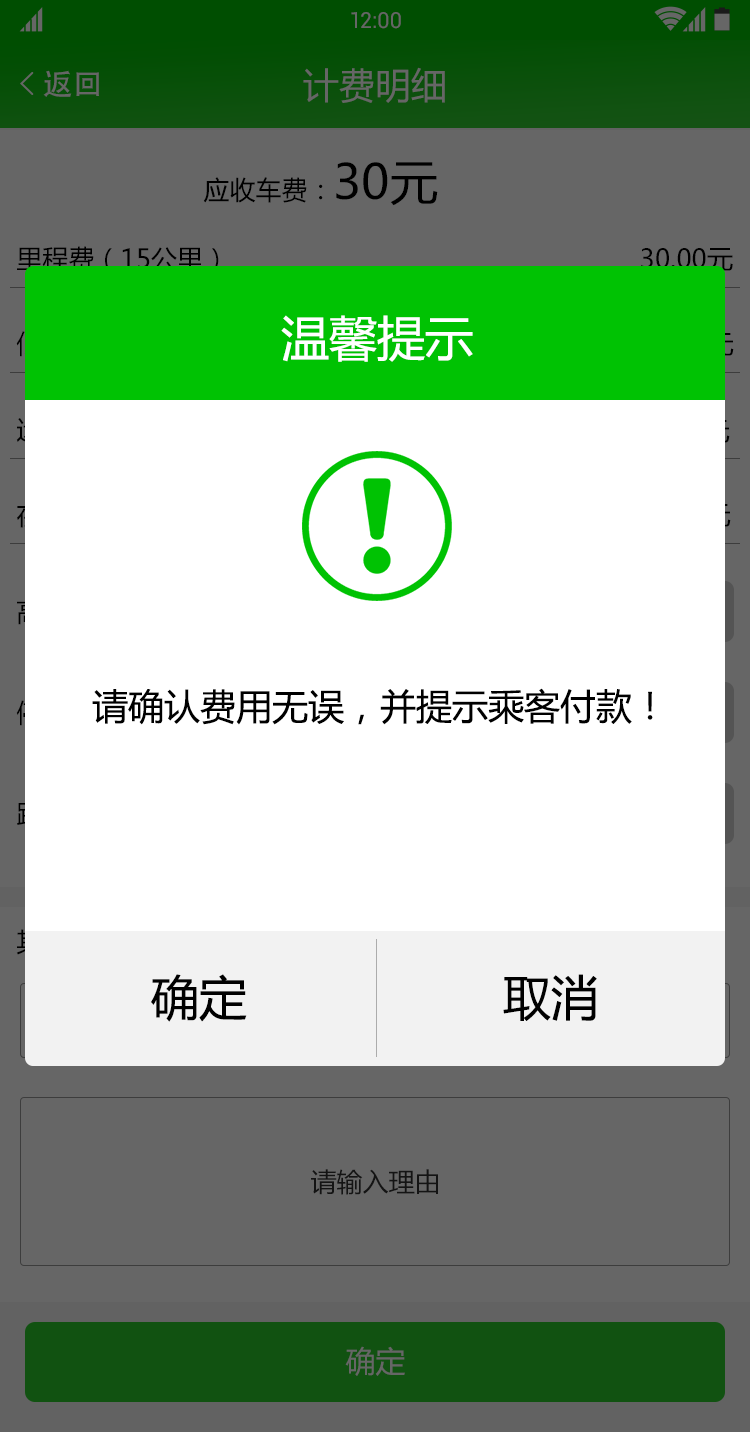
<style>
.page{position:relative;width:750px;height:1432px;background:#ffffff}
.page>*{position:absolute;margin:0}
.t1{font:22px "Roboto-Regular";color:#666666}
.t2{font:30px "AdobeHeitiStd-Regular";color:#666666}
.t3{font:36px "MicrosoftYaHei";color:#666666}
.t4{font:26px "MicrosoftYaHei";color:#000000}
.t5{font:48px "MicrosoftYaHei";color:#000000}
.t6{font:48px "MicrosoftYaHei";color:#ffffff;text-transform:uppercase}
.t7{font:36px "MicrosoftYaHei";color:#000000;text-transform:uppercase}
.t8{font:48px "MicrosoftYaHei";color:#000000;text-transform:uppercase}
.t9{font:26px "MicrosoftYaHei";color:#141414}
.t10{font:30px "MicrosoftYaHei";color:#666666}
</style>
<div class="page">
<p class="t1" style="left:351px;top:12px;width:50px;height:17px">12:00</p>
<p class="t2" style="left:43px;top:70px;width:56px;height:27px">返回</p>
<p class="t3" style="left:303px;top:67px;width:142px;height:36px">计费明细</p>
<p class="t4" style="left:203px;top:162px;width:235px;height:44px">应收车费：<span class="t5">30元</span></p>
<p class="t4" style="left:17px;top:246px;width:202px;height:27px">里程费（15公里）</p>
<p class="t4" style="left:641px;top:248px;width:92px;height:24px">30.00元</p>
<p class="t6" style="left:281px;top:315px;width:192px;height:47px">温馨提示</p>
<p class="t7" style="left:92px;top:688px;width:561px;height:37px">请确认费用无误，并提示乘客付款！</p>
<p class="t8" style="left:151px;top:974px;width:96px;height:48px">确定</p>
<p class="t8" style="left:503px;top:974px;width:94px;height:47px">取消</p>
<p class="t9" style="left:311px;top:1169px;width:127px;height:26px">请输入理由</p>
<p class="t10" style="left:345px;top:1346px;width:60px;height:30px">确定</p>
</div>
